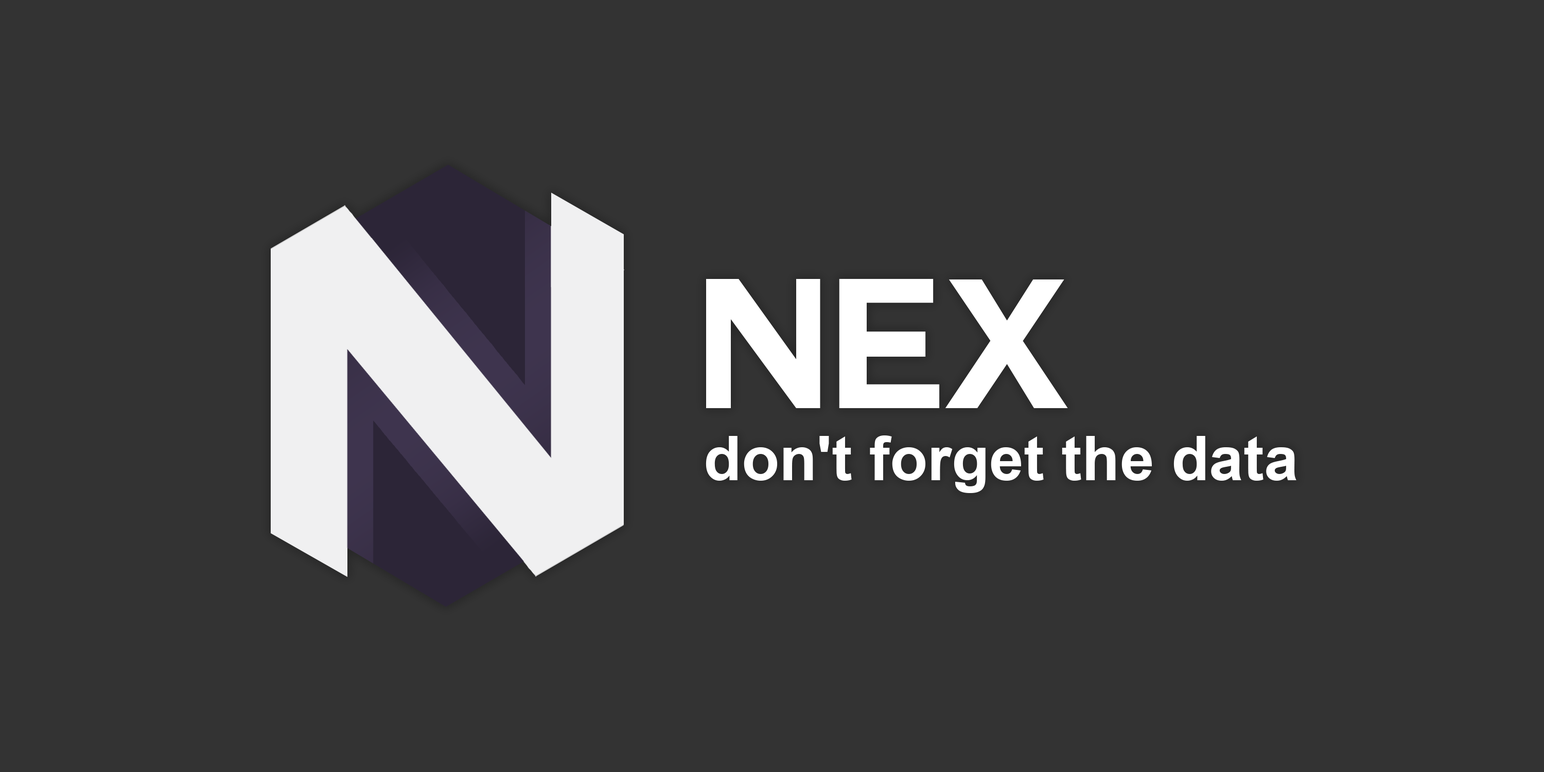
<style>
.page{position:relative;width:1544px;height:772px;background:#333333}
.page>*{position:absolute;margin:0}
.t1{font:180.2px "Couture-Bold";color:#ffffff}
.t2{font:61.8px "Arial-BoldMT";color:#ffffff}
</style>
<div class="page">
<p class="t1" style="left:706px;top:278px;width:362px;height:130px">NEX</p>
<p class="t2" style="left:706px;top:435px;width:591px;height:58px">don't forget the data</p>
</div>
